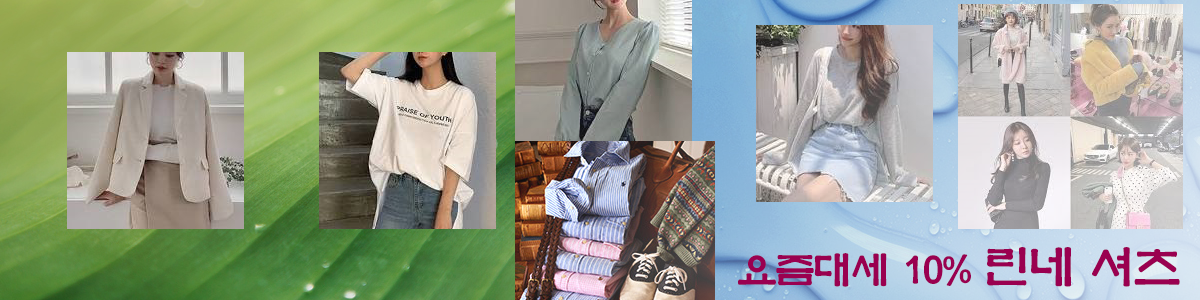
<style>
.page{position:relative;width:1200px;height:300px}
.page>*{position:absolute;margin:0}
.t1{font:40px "YetR-HM";letter-spacing:-0.05em;color:#9a0050}
.t2{font:48px "YetR-HM";letter-spacing:-0.075em;color:#9a0050}
</style>
<div class="page">
<p class="t1" style="left:738px;top:247px;width:442px;height:40px">요즘대세 10% <span class="t2">린네 셔츠</span></p>
</div>
